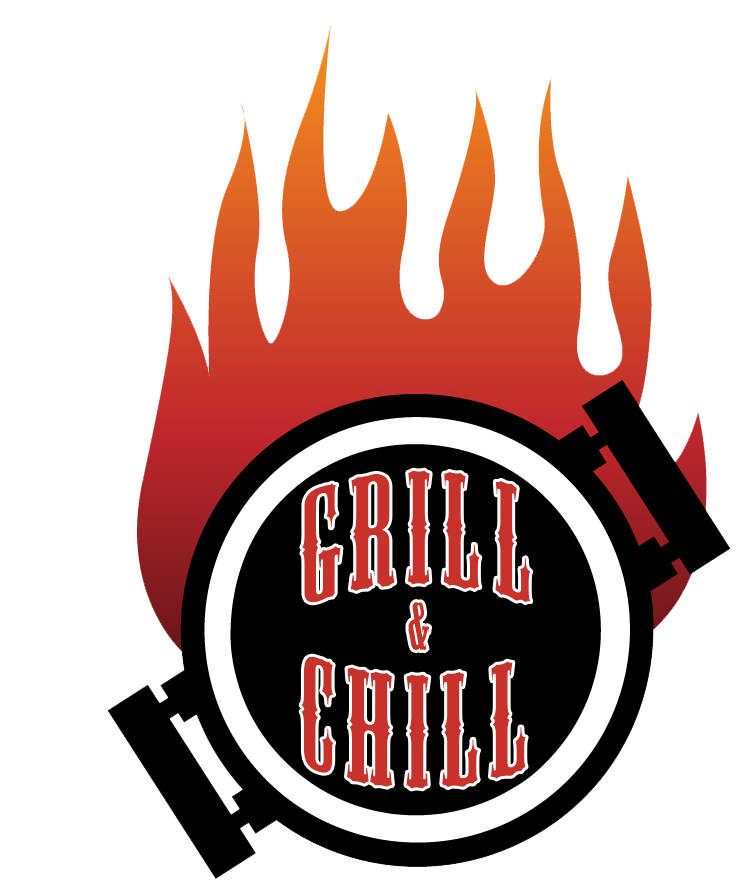
<style>
.page{position:relative;width:740px;height:885px;background:#ffffff}
.page>*{position:absolute;margin:0}
.t1{font:150px "MesquiteStd";letter-spacing:0.08em;color:#c7322b}
.t2{font:62.5px "MesquiteStd";color:#c7322b}
</style>
<div class="page">
<p class="t1" style="left:302px;top:470px;width:229px;height:133px">Grill</p>
<p class="t2" style="left:408px;top:602px;width:21px;height:49px;rotate:2deg">&amp;</p>
<p class="t1" style="left:301px;top:656px;width:225px;height:133px">Chill</p>
</div>
